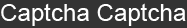
<style>
.page{position:relative;width:187px;height:28px;background:#333333}
.page>*{position:absolute;margin:0}
.t1{font:24.1px "ArialMT";color:#ffffff}
</style>
<div class="page">
<p class="t1" style="left:1px;top:3px;width:185px;height:23px">Captcha Captcha</p>
</div>
